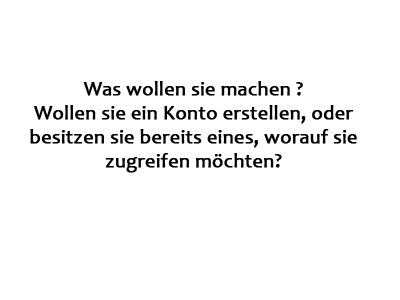
<style>
.page{position:relative;width:400px;height:300px;background:#ffffff}
.page>*{position:absolute;margin:0}
.t1{font:20px "Candara";color:#000000;font-weight:bold}
</style>
<div class="page">
<p class="t1" style="left:30px;top:81px;width:327px;height:92px;text-align:center">Was wollen sie machen ?<br>Wollen sie ein Konto erstellen, oder besitzen sie bereits eines, worauf sie zugreifen möchten?</p>
</div>
